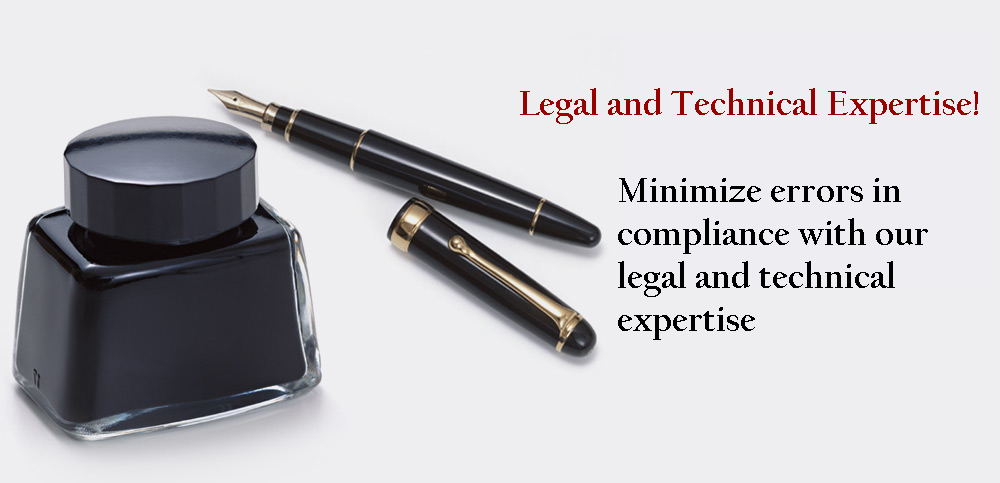
<style>
.page{position:relative;width:1000px;height:483px;background:#eeeef0}
.page>*{position:absolute;margin:0}
.t1{font:36px "CalifornianFB-Bold";color:#990000}
.t2{font:36px "CalifornianFB-Bold";color:#000000}
</style>
<div class="page">
<p class="t1" style="left:520px;top:88px;width:458px;height:36px">Legal and Technical Expertise!</p>
<p class="t1" style="left:520px;top:88px;width:458px;height:36px">Legal and Technical Expertise!</p>
<p class="t2" style="left:618px;top:178px;width:310px;height:162px">Minimize errors in <br>compliance with our <br>legal and technical <br>expertise</p>
<p class="t2" style="left:618px;top:178px;width:310px;height:162px">Minimize errors in <br>compliance with our <br>legal and technical <br>expertise</p>
</div>
